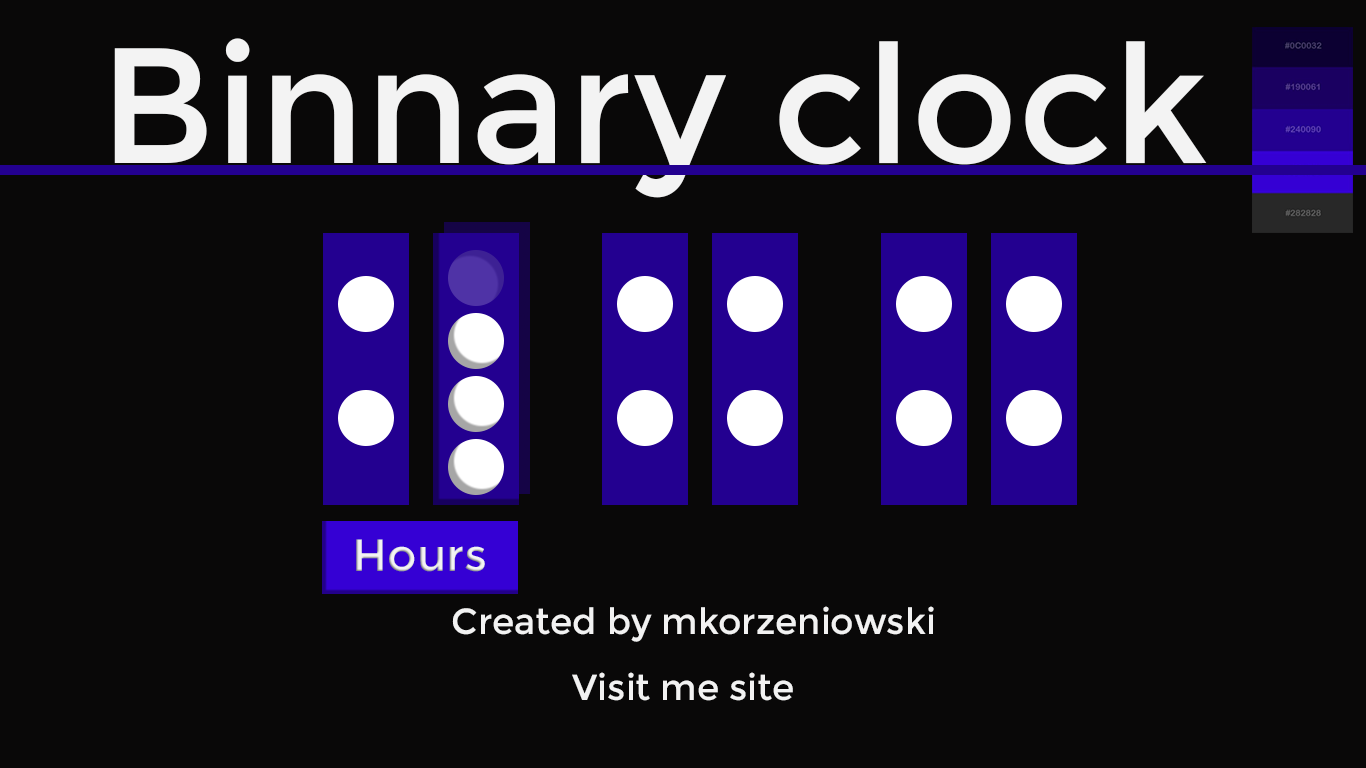
<style>
.page{position:relative;width:1366px;height:768px;background:#090808}
.page>*{position:absolute;margin:0}
.t1{font:164px "Montserrat-Regular";color:#f3f3f3}
.t2{font:45px "Montserrat-Regular";color:#f3f3f3}
.t3{font:36px "Montserrat-Regular";color:#f2f2f2}
</style>
<div class="page">
<p class="t1" style="left:114px;top:38px;width:1093px;height:160px">Binnary clock</p>
<p class="t2" style="left:356px;top:539px;width:129px;height:33px">Hours</p>
<p class="t3" style="left:452px;top:606px;width:482px;height:36px">Created by mkorzeniowski</p>
<p class="t3" style="left:572px;top:672px;width:221px;height:29px">Visit me site</p>
</div>
